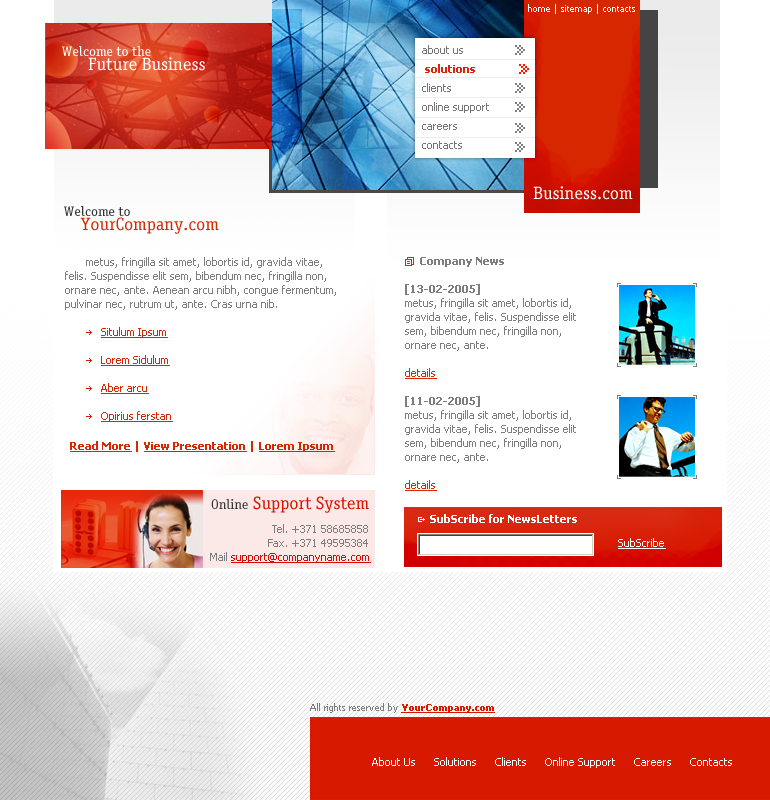
<style>
.page{position:relative;width:770px;height:800px;background:#ffffff}
.page>*{position:absolute;margin:0}
.t1{font:9px "Tahoma";color:#ffffff}
.t2{font:18px/14px "OfficinaSerifCTT";color:#ffffff}
.t3{font:14px/14px "OfficinaSerifCTT";color:#ffffff}
.t4{font:11px/19px "Tahoma";color:#757575}
.t5{font:11px/19px "Tahoma-Bold";color:#d9260f}
.t6{font:18px "OfficinaSerifCTT";color:#ffffff}
.t7{font:18px/14px "OfficinaSerifCTT";color:#d72700}
.t8{font:14px/14px "OfficinaSerifCTT";color:#313131}
.t9{font:11px/14px "Tahoma";color:#7d7d7d}
.t10{font:11px/14px "Tahoma";color:#d72700;text-decoration:underline}
.t11{font:11px/14px "Tahoma-Bold";color:#7d7d7d}
.t12{font:11px "Tahoma-Bold";color:#d72700;text-decoration:underline}
.t13{font:11px "Tahoma-Bold";color:#d72700}
.t14{font:18px "OfficinaSerifCTT";color:#d61300}
.t15{font:14px "OfficinaSerifCTT";color:#343434}
.t16{font:11px "Tahoma-Bold";color:#ffffff}
.t17{font:11px/14px "Tahoma";color:#d50d00;text-decoration:underline}
.t18{font:11px "Tahoma";color:#ffffff;text-decoration:underline}
.t19{font:9px "Tahoma";color:#7d7d7d}
.t20{font:9px "Tahoma-Bold";color:#d71900;text-decoration:underline}
.t21{font:11px "Tahoma";color:#ffffff}
</style>
<div class="page">
<p class="t1" style="left:528px;top:4px;width:107px;height:10px">home | sitemap | contacts</p>
<p class="t2" style="left:62px;top:46px;width:143px;height:25px"><span class="t3">Welcome to the <br>        </span>Future Business</p>
<p class="t4" style="left:422px;top:45px;width:67px;height:104px">about us<br><span class="t5"> solutions<br></span>clients<br>online support<br>careers<br>contacts</p>
<p class="t6" style="left:533px;top:186px;width:100px;height:14px">Business.com</p>
<p class="t7" style="left:64px;top:206px;width:155px;height:28px"><span class="t8">Welcome to <br></span>    YourCompany.com</p>
<p class="t9" style="left:65px;top:257px;width:271px;height:165px">metus, fringilla sit amet, lobortis id, gravida vitae, <br>felis. Suspendisse elit sem, bibendum nec, fringilla non, <br>ornare nec, ante. Aenean arcu nibh, congue fermentum, <br>pulvinar nec, rutrum ut, ante. Cras urna nib.<br><br> <span class="t10">Situlum Ipsum<br><br> Lorem Sidulum<br><br> Aber arcu<br><br> Opirius ferstan</span></p>
<p class="t9" style="left:405px;top:257px;width:171px;height:234px"><span class="t11">     Company News<br><br>[13-02-2005]<br></span>metus, fringilla sit amet, lobortis id, <br>gravida vitae, felis. Suspendisse elit <br>sem, bibendum nec, fringilla non, <br>ornare nec, ante.<br><br><span class="t10">details<br><br></span><span class="t11">[11-02-2005]<br></span>metus, fringilla sit amet, lobortis id, <br>gravida vitae, felis. Suspendisse elit <br>sem, bibendum nec, fringilla non, <br>ornare nec, ante.<br><br><span class="t10">details</span></p>
<p class="t12" style="left:70px;top:441px;width:265px;height:11px">Read More<span class="t13"> | </span>View Presentation<span class="t13"> | </span>Lorem Ipsum</p>
<p class="t14" style="left:211px;top:496px;width:158px;height:17px"><span class="t15">Online </span>Support System</p>
<p class="t16" style="left:430px;top:514px;width:147px;height:9px">SubScribe for NewsLetters</p>
<p class="t9" style="left:210px;top:524px;width:161px;height:39px;text-align:right">Tel. +371 58685858<br>Fax. +371 49595384<br>Mail <span class="t17">support@companyname.com</span></p>
<p class="t18" style="left:618px;top:538px;width:48px;height:11px">SubScribe</p>
<p class="t19" style="left:310px;top:703px;width:185px;height:10px">All rights reserved by <span class="t20">YourCompany.com</span></p>
<p class="t21" style="left:372px;top:757px;width:360px;height:11px">About Us      Solutions      Clients      Online Support      Careers      Contacts</p>
</div>
